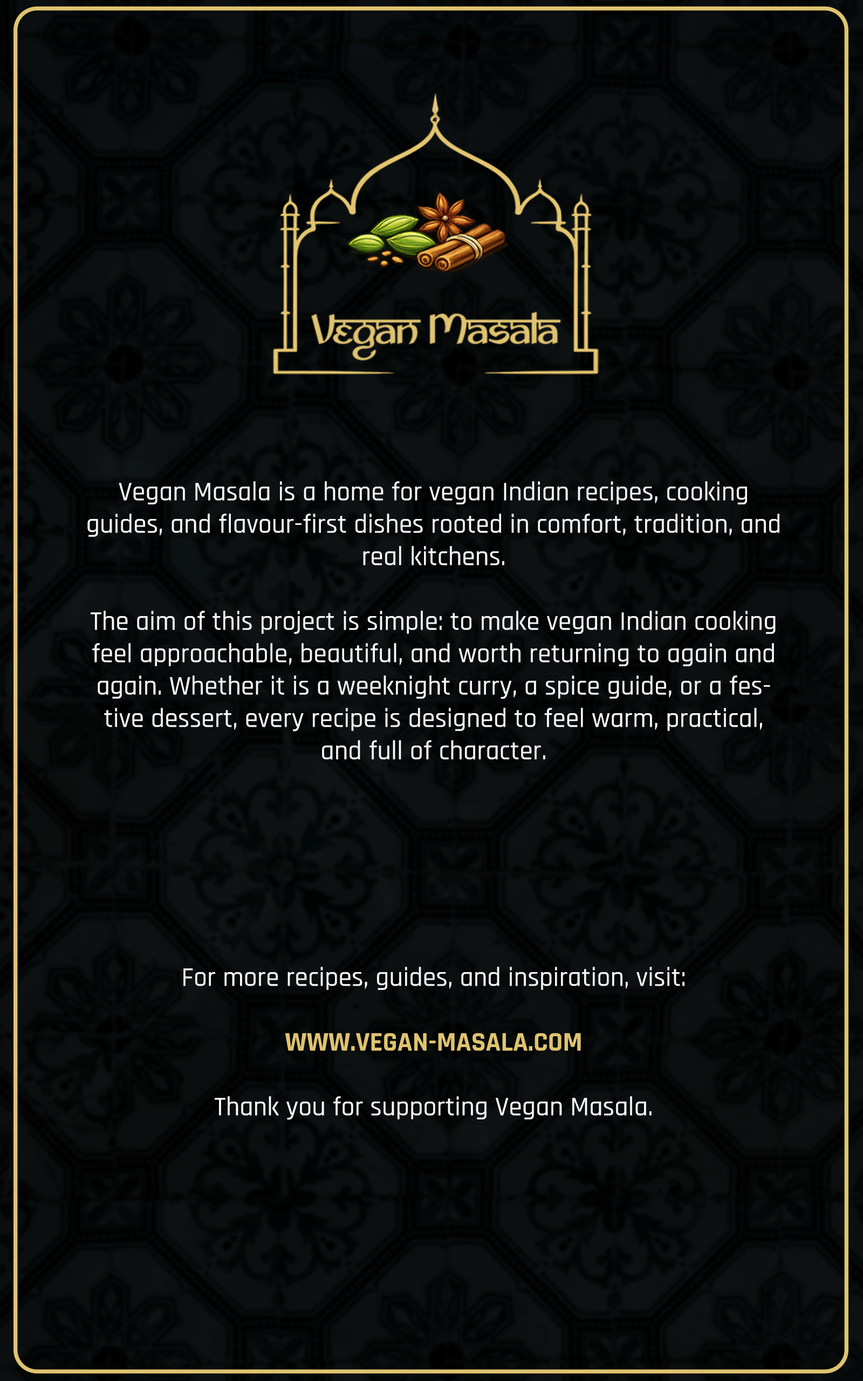
<style>
.page{position:relative;width:863px;height:1381px}
.page>*{position:absolute;margin:0}
.t1{font:27px "Rajdhani-Medium";color:#f8f8f8}
.t2{font:27px "Rajdhani-Bold";color:#dfc370}
</style>
<div class="page">
<p class="t1" style="left:87px;top:481px;width:693px;height:639px;text-align:center">Vegan Masala is a home for vegan Indian recipes, cooking guides, and flavour-first dishes rooted in comfort, tradition, and real kitchens.<br><br>The aim of this project is simple: to make vegan Indian cooking feel approachable, beautiful, and worth returning to again and again. Whether it is a weeknight curry, a spice guide, or a festive dessert, every recipe is designed to feel warm, practical, and full of character.<br><br><br><br><br><br><br>For more recipes, guides, and inspiration, visit:<br><br><span class="t2">WWW.VEGAN-MASALA.COM<br></span><br>Thank you for supporting Vegan Masala.</p>
</div>
